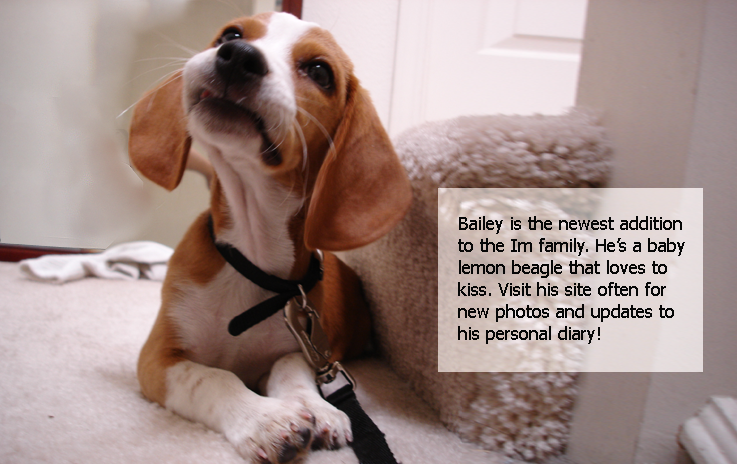
<style>
.page{position:relative;width:737px;height:464px}
.page>*{position:absolute;margin:0}
.t1{font:18px/22px "Tahoma";color:#070707}
</style>
<div class="page">
<p class="t1" style="left:458px;top:216px;width:227px;height:128px">Bailey is the newest addition <br>to the Im family. He’s a baby <br>lemon beagle that loves to <br>kiss. Visit his site often for<br>new photos and updates to <br>his personal diary!</p>
</div>
